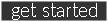
<style>
.page{position:relative;width:108px;height:22px;background:#333333}
.page>*{position:absolute;margin:0}
.t1{font:18.8px "Lato-Light";color:#ffffff}
</style>
<div class="page">
<p class="t1" style="left:12px;top:3px;width:85px;height:17px">get started</p>
</div>
